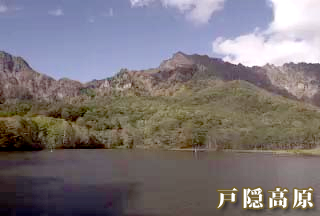
<style>
.page{position:relative;width:320px;height:216px}
.page>*{position:absolute;margin:0}
.t1{font:21px "KozMinPr6N-Heavy";letter-spacing:0.2em;color:#ffffff}
</style>
<div class="page">
<p class="t1" style="left:217px;top:187px;width:96px;height:21px">戸隠高原</p>
</div>
